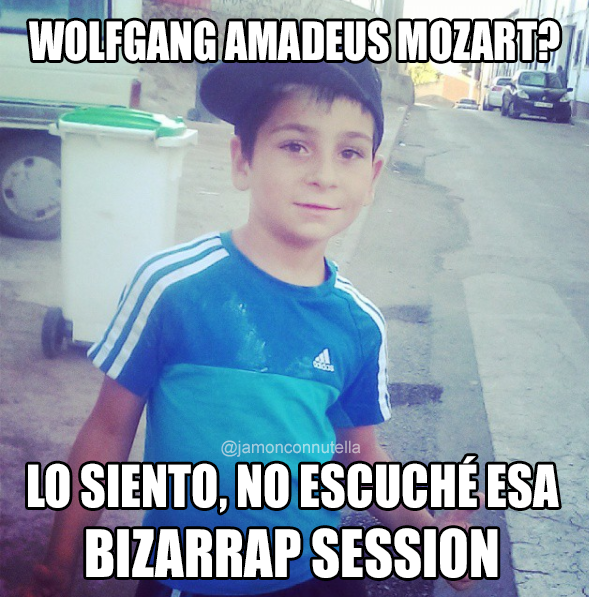
<style>
.page{position:relative;width:589px;height:597px}
.page>*{position:absolute;margin:0}
.t1{font:48.7px "Impact";color:#ffffff;scale:0.9 1}
.t2{font:16.9px "ArialMT";color:#a4d0e1}
.t3{font:53.6px "Impact";color:#ffffff;scale:0.94 1}
.t4{font:60.2px "Impact";color:#ffffff;scale:0.94 1}
</style>
<div class="page">
<p class="t1" style="left:29px;top:20px;width:531px;height:41px">WOLFGANG AMADEUS MOZART?</p>
<p class="t2" style="left:221px;top:440px;width:140px;height:17px">@jamonconnutella</p>
<p class="t3" style="left:28px;top:456px;width:531px;height:122px;text-align:center">LO SIENTO, NO ESCUCHÉ ESA<br><span class="t4">BIZARRAP SESSION</span></p>
</div>
